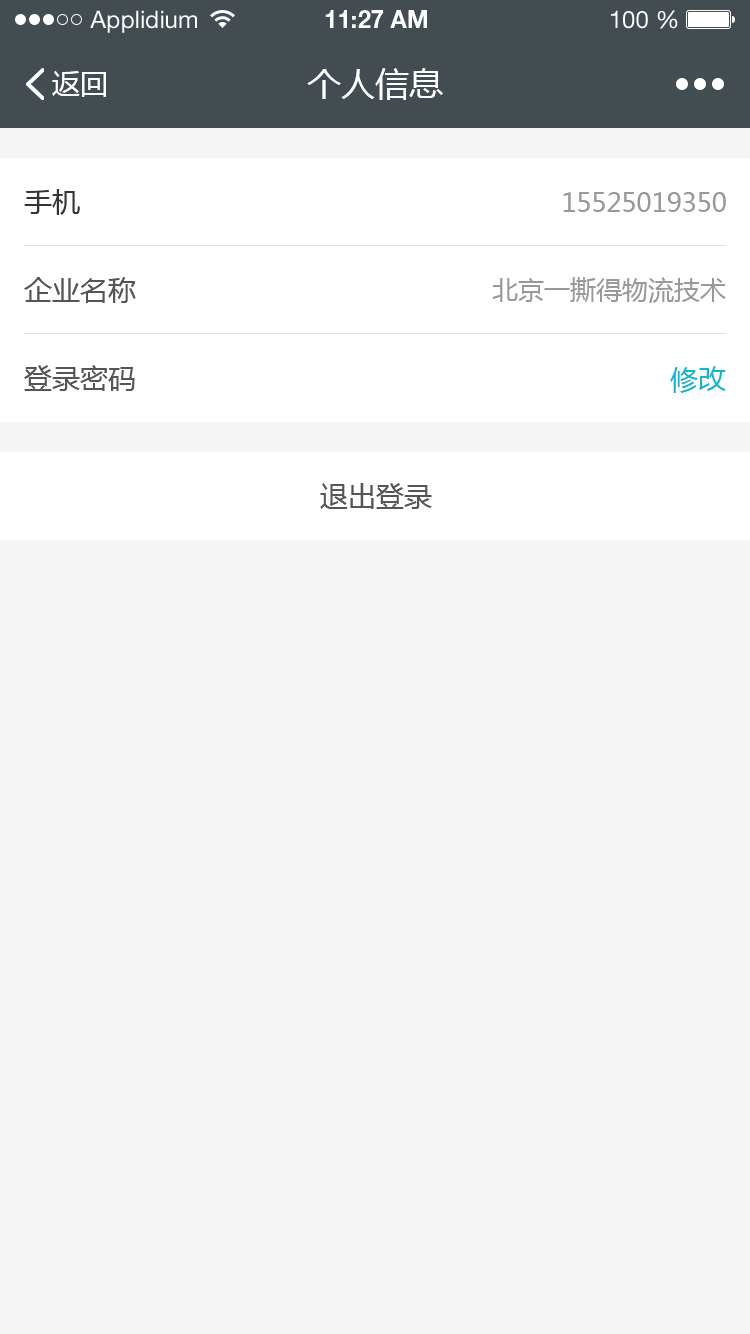
<style>
.page{position:relative;width:750px;height:1334px;background:#f5f5f5}
.page>*{position:absolute;margin:0}
.t1{font:24px "HelveticaNeueLTStd-Roman";color:#ffffff}
.t2{font:24px "HelveticaNeueLTStd-Bd";color:#ffffff}
.t3{font:28px "MicrosoftYaHei";color:#ffffff}
.t4{font:34px "MicrosoftYaHei";color:#ffffff}
.t5{font:28px "MicrosoftYaHei";color:#333333}
.t6{font:26px "MicrosoftYaHei";color:#999999}
.t7{font:28px "MicrosoftYaHei";color:#555555}
.t8{font:28px "MicrosoftYaHei";color:#15b4d0}
</style>
<div class="page">
<p class="t1" style="left:90px;top:10px;width:107px;height:23px">Applidium</p>
<p class="t2" style="left:325px;top:10px;width:102px;height:18px">11:27 AM</p>
<p class="t1" style="left:611px;top:10px;width:67px;height:19px">100 %</p>
<p class="t3" style="left:52px;top:71px;width:54px;height:26px">返回</p>
<p class="t4" style="left:307px;top:68px;width:136px;height:32px">个人信息</p>
<p class="t5" style="left:24px;top:189px;width:56px;height:26px">手机</p>
<p class="t6" style="left:563px;top:192px;width:163px;height:20px">15525019350</p>
<p class="t7" style="left:24px;top:277px;width:112px;height:26px">企业名称</p>
<p class="t6" style="left:492px;top:277px;width:234px;height:26px">北京一撕得物流技术</p>
<p class="t7" style="left:24px;top:365px;width:111px;height:26px">登录密码</p>
<p class="t8" style="left:670px;top:366px;width:56px;height:27px">修改</p>
<p class="t7" style="left:320px;top:483px;width:112px;height:26px">退出登录</p>
</div>
